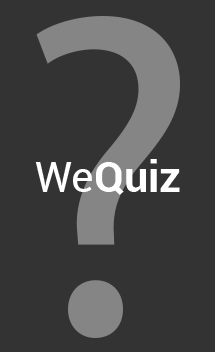
<style>
.page{position:relative;width:215px;height:352px;background:#333333}
.page>*{position:absolute;margin:0}
.t1{font:462.4px "MyriadPro-Regular";color:#858585}
.t2{font:42.6px "Roboto-Bold";color:#ffffff}
.t3{font:42.6px "Roboto-Regular";color:#ffffff}
</style>
<div class="page">
<p class="t1" style="left:36px;top:16px;width:144px;height:322px">?</p>
<p class="t2" style="left:35px;top:159px;width:145px;height:36px"><span class="t3">We</span>Quiz</p>
</div>
